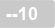
<style>
.page{position:relative;width:55px;height:28px;background:#c9c9c9}
.page>*{position:absolute;margin:0}
.t1{font:18.2px "Arial-BoldMT";color:#ffffff}
</style>
<div class="page">
<p class="t1" style="left:6px;top:7px;width:32px;height:13px">--10</p>
</div>
